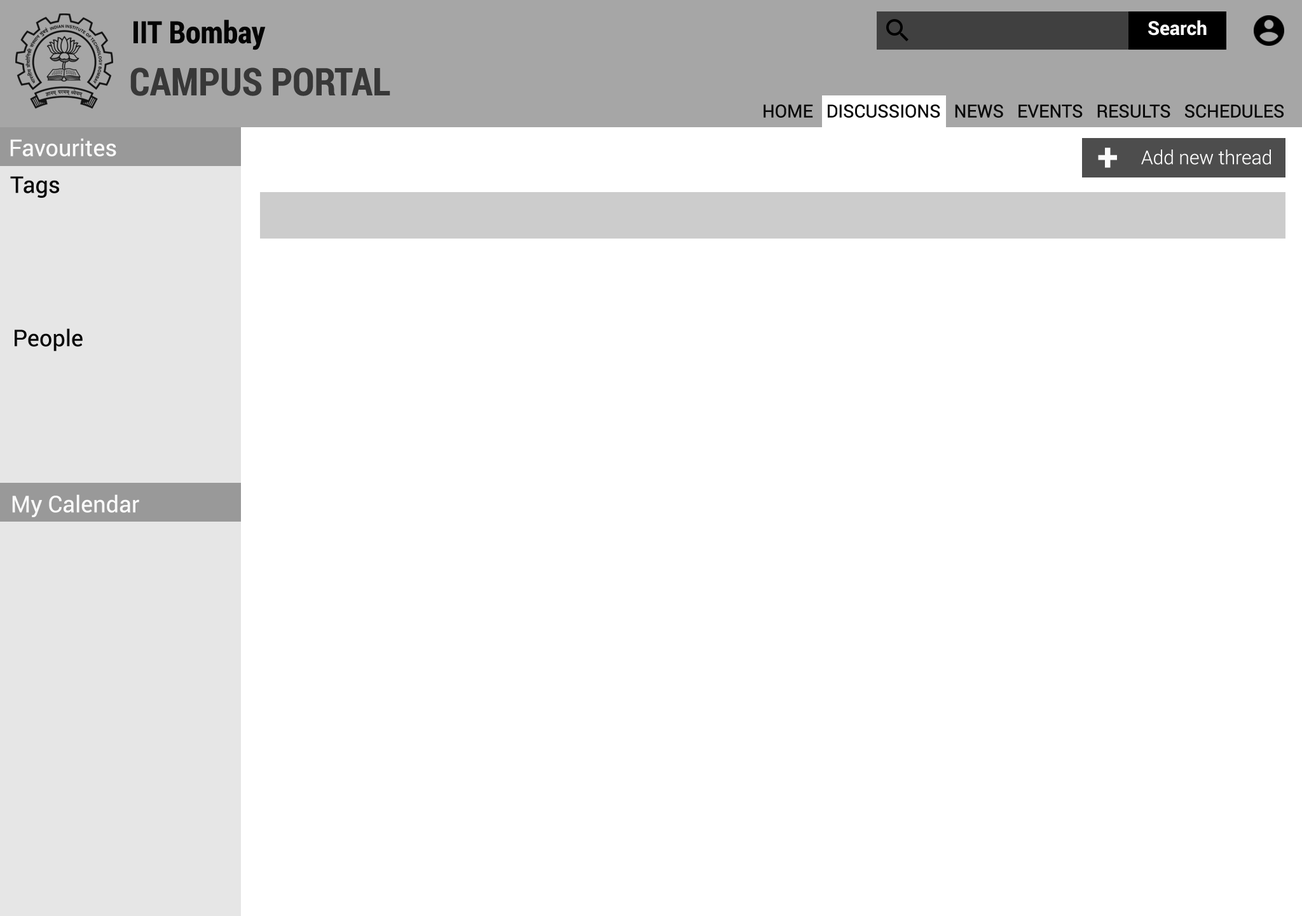
<style>
.page{position:relative;width:1302px;height:916px;background:#ffffff}
.page>*{position:absolute;margin:0}
.t1{font:30.5px "RobotoCondensed-Bold";color:#040404}
.t2{font:19.1px "Roboto-Bold";color:#f8f8f8}
.t3{font:38.2px "RobotoCondensed-Bold";color:#383838}
.t4{font:17.8px "Roboto-Regular";color:#090909}
.t5{font:22.9px "Roboto-Regular";color:#fafafa}
.t6{font:38.2px "Roboto-Bold";color:#fafafa}
.t7{font:19.1px "Roboto-Light";color:#fafafa}
.t8{font:22.9px "Roboto-Regular";color:#090909}
</style>
<div class="page">
<p class="t1" style="left:134px;top:20px;width:132px;height:30px">IIT Bombay</p>
<p class="t2" style="left:1148px;top:20px;width:59px;height:16px">Search</p>
<p class="t3" style="left:130px;top:67px;width:260px;height:29px">CAMPUS PORTAL</p>
<p class="t4" style="left:764px;top:104px;width:520px;height:14px">HOME   DISCUSSIONS   NEWS   EVENTS   RESULTS   SCHEDULES</p>
<p class="t5" style="left:10px;top:138px;width:106px;height:18px">Favourites</p>
<p class="t6" style="left:1098px;top:148px;width:19px;height:20px">+</p>
<p class="t7" style="left:1141px;top:149px;width:130px;height:16px">Add new thread</p>
<p class="t8" style="left:10px;top:176px;width:49px;height:22px">Tags</p>
<p class="t8" style="left:15px;top:328px;width:68px;height:23px">People</p>
<p class="t5" style="left:12px;top:494px;width:127px;height:23px">My Calendar</p>
</div>
